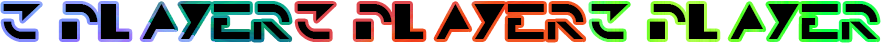
<style>
.page{position:relative;width:882px;height:43px;background:#ffffff}
.page>*{position:absolute;margin:0}
.t1{font:36px "TRON";color:#000000}
</style>
<div class="page">
<p class="t1" style="left:3px;top:4px;width:287px;height:36px">3 Player</p>
<p class="t1" style="left:297px;top:4px;width:287px;height:36px">3 Player</p>
<p class="t1" style="left:591px;top:4px;width:287px;height:36px">3 Player</p>
</div>
